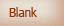
<style>
.page{position:relative;width:64px;height:26px}
.page>*{position:absolute;margin:0}
.t1{font:11.5px "Tahoma";color:#993300}
</style>
<div class="page">
<p class="t1" style="left:9px;top:7px;width:28px;height:10px">Blank</p>
</div>
